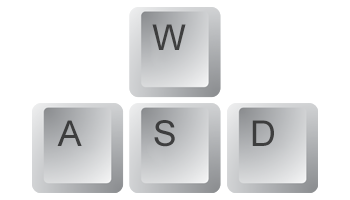
<style>
.page{position:relative;width:350px;height:200px;background:#ffffff}
.page>*{position:absolute;margin:0}
.t1{font:35.4px "ArialMT";letter-spacing:0.06em;color:#2a2a2a}
</style>
<div class="page">
<p class="t1" style="left:152px;top:24px;width:34px;height:26px;opacity:0.9">W</p>
<p class="t1" style="left:57px;top:120px;width:25px;height:26px;opacity:0.9">A</p>
<p class="t1" style="left:154px;top:120px;width:21px;height:27px;opacity:0.9">S</p>
<p class="t1" style="left:252px;top:120px;width:22px;height:26px;opacity:0.9">D</p>
</div>
